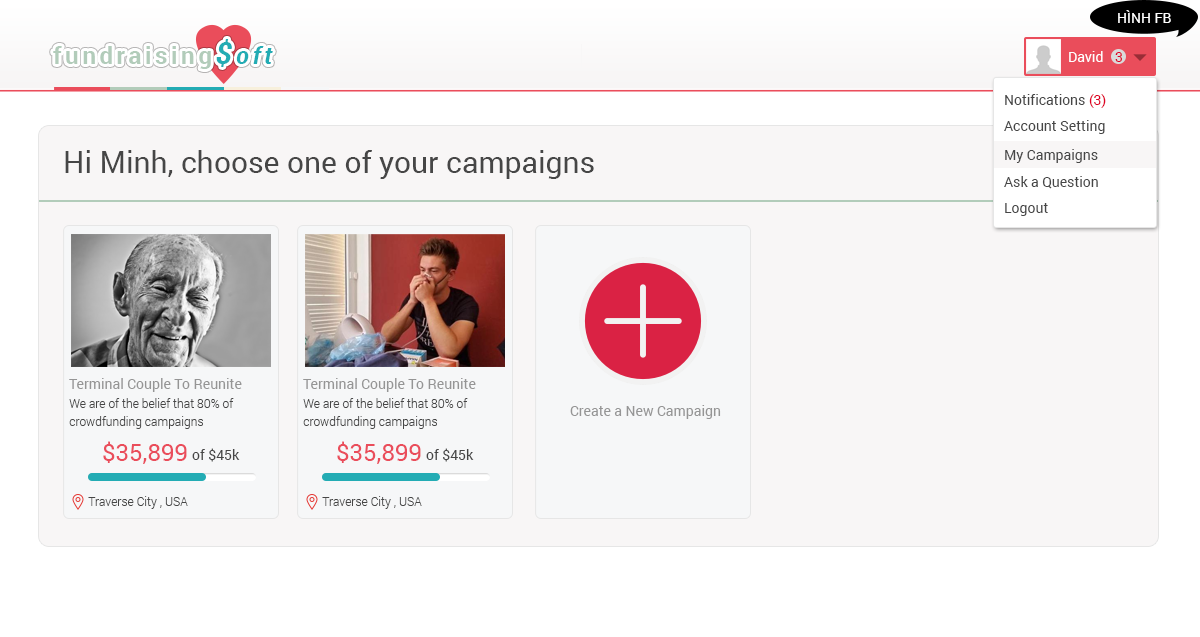
<style>
.page{position:relative;width:1200px;height:637px;background:#f8f6f6}
.page>*{position:absolute;margin:0}
.t1{font:14px "Roboto-Regular";color:#ffffff;text-transform:uppercase}
.t2{font:24px "Roboto-Bold";letter-spacing:0.15em;color:#b2ccba}
.t3{font:30px "Roboto-BoldItalic";letter-spacing:0.15em;color:#23acb4}
.t4{font:24px "Roboto-BoldItalic";letter-spacing:0.15em;color:#23acb4}
.t5{font:14px "Roboto-Regular";color:#ffffff}
.t6{font:14px "Roboto-Regular";color:#df0024}
.t7{font:14px "Roboto-Regular";color:#464646}
.t8{font:30px "Roboto-Regular";color:#464646}
.t9{font:14px "Roboto-Regular";color:#959595}
.t10{font:12px/18px "Roboto-Light";color:#464646}
.t11{font:24px "Roboto-Regular";color:#ea4d5b}
.t12{font:12px "Roboto-Light";color:#464646}
</style>
<div class="page">
<p class="t1" style="left:1118px;top:10px;width:53px;height:13px">hình fb</p>
<p class="t2" style="left:53px;top:39px;width:220px;height:30px">fundraising<span class="t3">$</span><span class="t4">oft</span></p>
<p class="t5" style="left:1069px;top:51px;width:34px;height:11px">David</p>
<p class="t6" style="left:1115px;top:52px;width:7px;height:10px">3</p>
<p class="t7" style="left:1005px;top:94px;width:101px;height:14px">Notifications <span class="t6">(3)</span></p>
<p class="t7" style="left:1004px;top:120px;width:101px;height:14px">Account Setting</p>
<p class="t8" style="left:65px;top:150px;width:529px;height:29px">Hi Minh, choose one of your campaigns</p>
<p class="t7" style="left:1005px;top:149px;width:93px;height:14px">My Campaigns</p>
<p class="t7" style="left:1004px;top:176px;width:94px;height:13px">Ask a Question</p>
<p class="t7" style="left:1005px;top:203px;width:43px;height:13px">Logout</p>
<p class="t9" style="left:69px;top:378px;width:173px;height:14px">Terminal Couple To Reunite</p>
<p class="t9" style="left:303px;top:378px;width:173px;height:14px">Terminal Couple To Reunite</p>
<p class="t10" style="left:69px;top:398px;width:165px;height:31px">We are of the belief that 80% of crowdfunding campaigns</p>
<p class="t10" style="left:303px;top:398px;width:165px;height:31px">We are of the belief that 80% of crowdfunding campaigns</p>
<p class="t9" style="left:570px;top:405px;width:151px;height:14px">Create a New Campaign</p>
<p class="t11" style="left:103px;top:441px;width:84px;height:23px">$35,899</p>
<p class="t7" style="left:192px;top:448px;width:48px;height:14px">of $45k</p>
<p class="t11" style="left:337px;top:441px;width:84px;height:23px">$35,899</p>
<p class="t7" style="left:426px;top:448px;width:48px;height:14px">of $45k</p>
<p class="t12" style="left:88px;top:496px;width:100px;height:13px">Traverse City , USA</p>
<p class="t12" style="left:322px;top:496px;width:100px;height:13px">Traverse City , USA</p>
</div>
